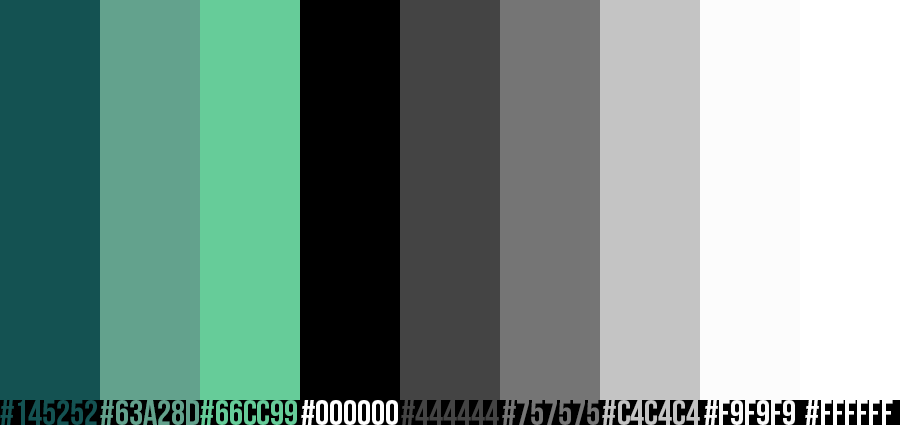
<style>
.page{position:relative;width:900px;height:425px}
.page>*{position:absolute;margin:0}
.t1{font:36px "BebasNeue";letter-spacing:-0.007em;color:#145252}
.t2{font:36px "BebasNeue";letter-spacing:-0.007em;color:#63a28d}
.t3{font:36px "BebasNeue";letter-spacing:-0.007em;color:#66cc99}
.t4{font:36px "BebasNeue";letter-spacing:-0.007em;color:#ffffff}
.t5{font:36px "BebasNeue";letter-spacing:-0.007em;color:#444444}
.t6{font:36px "BebasNeue";letter-spacing:-0.007em;color:#757575}
.t7{font:36px "BebasNeue";letter-spacing:-0.007em;color:#c4c4c4}
.t8{font:36px "BebasNeue";letter-spacing:-0.007em;color:#f9f9f9}
</style>
<div class="page">
<p class="t1" style="left:0px;top:400px;width:97px;height:25px">#145252</p>
<p class="t2" style="left:100px;top:400px;width:99px;height:25px">#63a28d</p>
<p class="t3" style="left:200px;top:400px;width:97px;height:25px">#66cc99</p>
<p class="t4" style="left:301px;top:400px;width:97px;height:25px">#000000</p>
<p class="t5" style="left:401px;top:400px;width:98px;height:25px">#444444</p>
<p class="t6" style="left:502px;top:400px;width:97px;height:25px">#757575</p>
<p class="t7" style="left:602px;top:400px;width:98px;height:25px">#c4c4c4</p>
<p class="t8" style="left:704px;top:400px;width:91px;height:25px">#f9f9f9</p>
<p class="t4" style="left:805px;top:400px;width:88px;height:25px">#ffffff</p>
</div>
